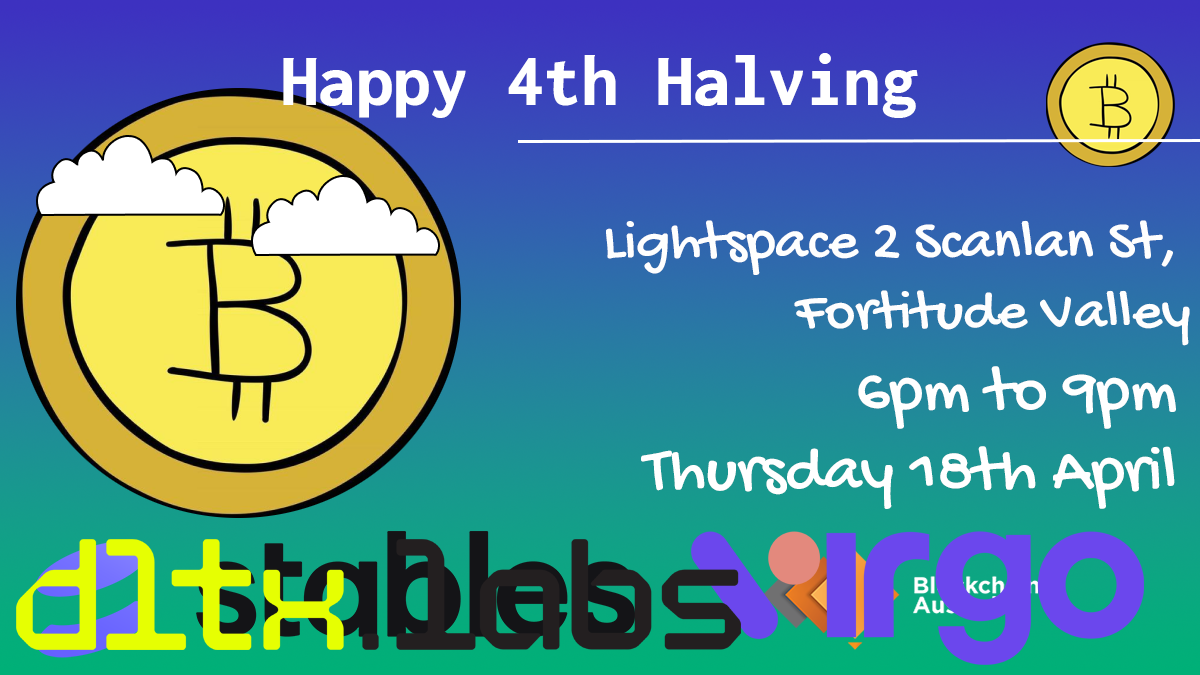
<style>
.page{position:relative;width:1200px;height:675px}
.page>*{position:absolute;margin:0}
.t1{font:75px "Inconsolata-ExtraBold";color:#ffffff}
.t2{font:58.3px "GochiHand-Regular";color:#fefefe}
.t3{font:66.7px "GochiHand-Regular";color:#fefefe}
.t4{font:66.7px "GochiHand-Regular";color:#ffffff}
</style>
<div class="page">
<p class="t1" style="left:283px;top:53px;width:635px;height:65px">Happy 4th Halving</p>
<p class="t2" style="left:606px;top:220px;width:584px;height:126px;text-align:right"><span class="t3"> </span>Lightspace 2 Scanlan St, <br>Fortitude Valley</p>
<p class="t4" style="left:641px;top:366px;width:535px;height:143px;text-align:right">6pm to 9pm<br>Thursday 18th April</p>
</div>
